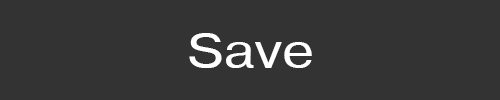
<style>
.page{position:relative;width:500px;height:100px;background:#333333}
.page>*{position:absolute;margin:0}
.t1{font:48px "Helvetica";color:#ffffff;scale:1.2 1}
</style>
<div class="page">
<p class="t1" style="left:189px;top:33px;width:123px;height:35px">Save</p>
</div>
